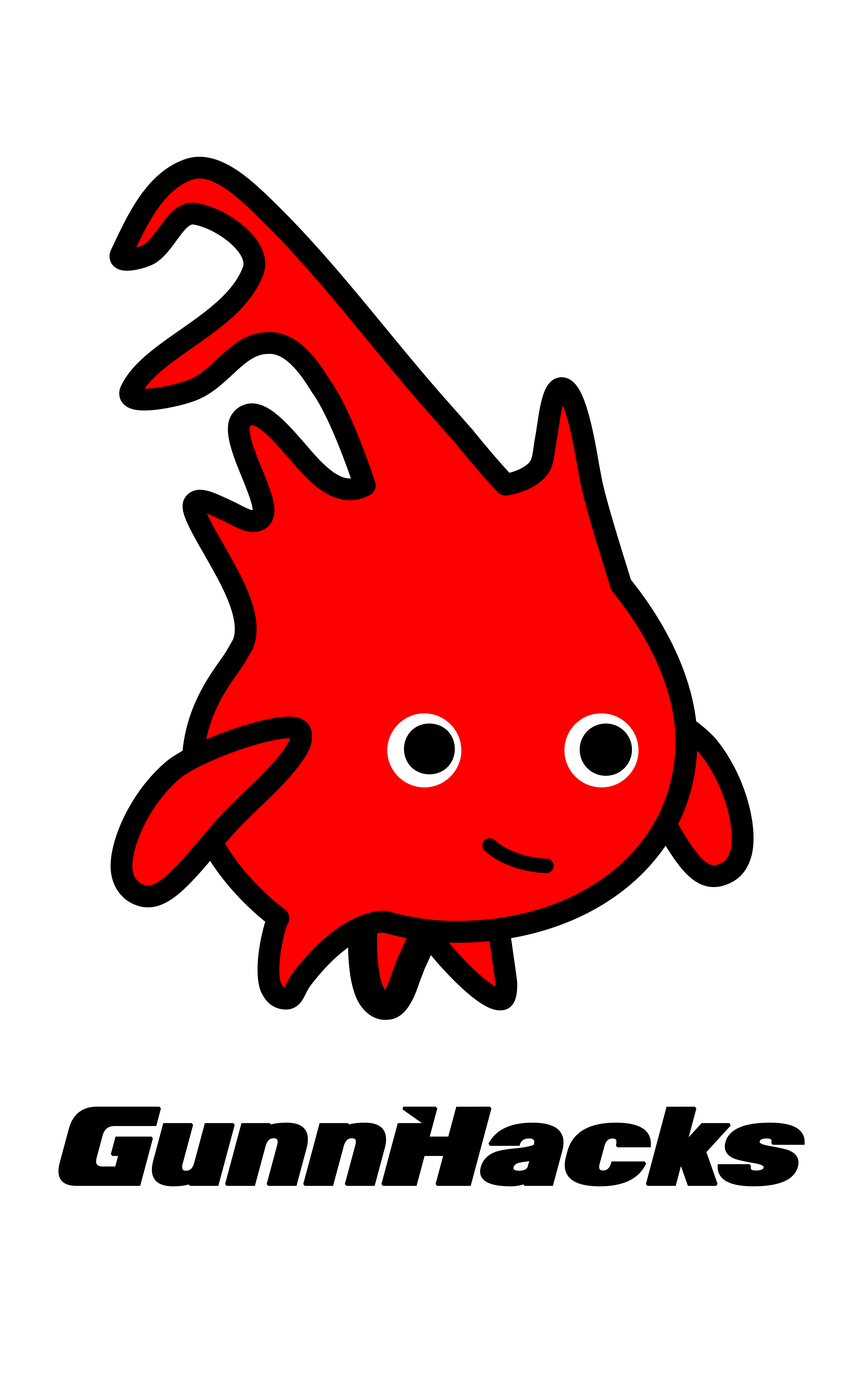
<style>
.page{position:relative;width:863px;height:1381px;background:#ffffff}
.page>*{position:absolute;margin:0}
.t1{font:108.9px "InfiniteJustice";color:#000000;font-weight:bold}
</style>
<div class="page">
<p class="t1" style="left:58px;top:1107px;width:747px;height:80px">GunnHacks</p>
</div>
